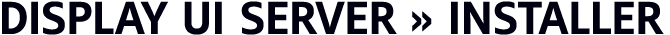
<style>
.page{position:relative;width:670px;height:35px;background:#ffffff}
.page>*{position:absolute;margin:0}
.t1{font:48px "MayberryPro-Semibold";letter-spacing:-0.005em;color:#000011;text-transform:uppercase}
</style>
<div class="page">
<p class="t1" style="left:2px;top:1px;width:662px;height:34px">Display UI Server » Installer</p>
</div>
